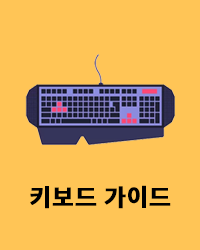
<style>
.page{position:relative;width:200px;height:250px;background:#ffc556}
.page>*{position:absolute;margin:0}
.t1{font:24px "SpoqaHanSansNeo-Bold";color:#000000;font-weight:bold}
</style>
<div class="page">
<p class="t1" style="left:30px;top:185px;width:141px;height:24px">키보드 가이드</p>
</div>
